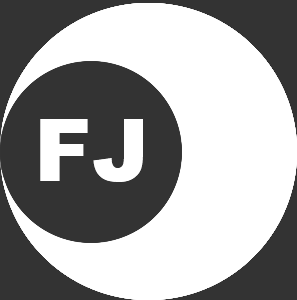
<style>
.page{position:relative;width:297px;height:300px;background:#ffffff}
.page>*{position:absolute;margin:0}
.t1{font:86.1px "Arial-Black";color:#ffffff}
</style>
<div class="page">
<p class="t1" style="left:40px;top:119px;width:103px;height:63px">FJ</p>
</div>
